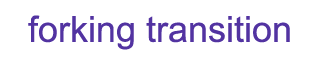
<style>
.page{position:relative;width:320px;height:60px;background:#ffffff}
.page>*{position:absolute;margin:0}
.t1{font:36px "ArialMT";color:#5233a1}
</style>
<div class="page">
<p class="t1" style="left:28px;top:15px;width:262px;height:35px">forking transition</p>
</div>
